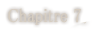
<style>
.page{position:relative;width:104px;height:31px;background:#ffffff}
.page>*{position:absolute;margin:0}
.t1{font:19px "MS-PMincho";color:#d6cdc1;font-weight:bold;scale:0.84 1}
</style>
<div class="page">
<p class="t1" style="left:8px;top:8px;width:73px;height:17px">Chapitre 7</p>
</div>
